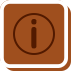
<style>
.page{position:relative;width:71px;height:71px;background:#9f4f1e}
.page>*{position:absolute;margin:0}
.t1{font:40px "ArialRoundedMTBold";color:#521a00;font-weight:bold;scale:0.82 1}
</style>
<div class="page">
<p class="t1" style="left:31px;top:19px;width:6px;height:30px">i</p>
</div>
